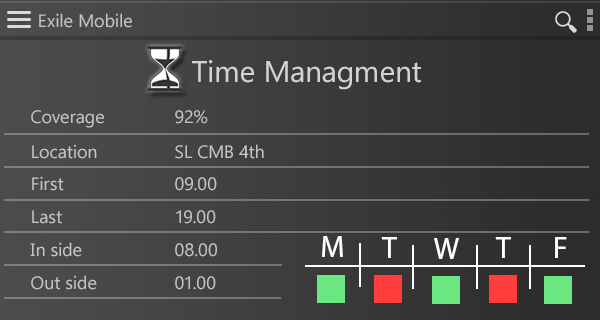
<style>
.page{position:relative;width:600px;height:320px}
.page>*{position:absolute;margin:0}
.t1{font:18px "NirmalaUI";color:#bec8cb}
.t2{font:30px "NirmalaUI";color:#d3d3d3}
.t3{font:30px "MyriadHebrew-Regular";color:#ffffff}
</style>
<div class="page">
<p class="t1" style="left:39px;top:13px;width:93px;height:15px">Exile Mobile</p>
<p class="t2" style="left:192px;top:60px;width:229px;height:30px">Time Managment</p>
<p class="t1" style="left:31px;top:110px;width:177px;height:18px">Coverage   92%</p>
<p class="t1" style="left:32px;top:144px;width:232px;height:15px">Location   SL CMB 4th</p>
<p class="t1" style="left:32px;top:176px;width:185px;height:15px">First    09.00</p>
<p class="t1" style="left:32px;top:210px;width:184px;height:14px">Last    19.00</p>
<p class="t1" style="left:30px;top:242px;width:187px;height:15px">In side   08.00</p>
<p class="t3" style="left:322px;top:236px;width:21px;height:21px">M</p>
<p class="t3" style="left:381px;top:237px;width:16px;height:21px">T</p>
<p class="t3" style="left:434px;top:238px;width:25px;height:21px">W</p>
<p class="t3" style="left:495px;top:237px;width:16px;height:21px">T</p>
<p class="t3" style="left:555px;top:237px;width:12px;height:21px">F</p>
<p class="t1" style="left:31px;top:275px;width:185px;height:15px">Out side   01.00</p>
</div>
